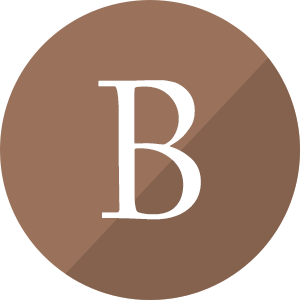
<style>
.page{position:relative;width:300px;height:300px;background:#9a725b}
.page>*{position:absolute;margin:0}
.t1{font:208.3px "CalifornianFB-Reg";letter-spacing:-0.08em;color:#ffffff}
</style>
<div class="page">
<p class="t1" style="left:98px;top:80px;width:103px;height:140px">B</p>
</div>
